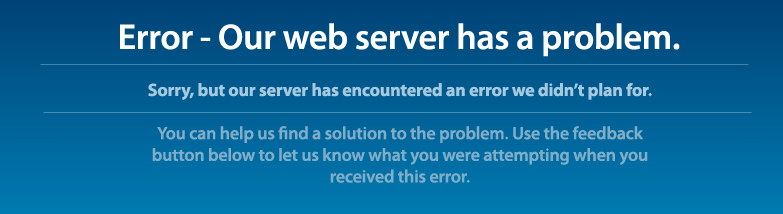
<style>
.page{position:relative;width:783px;height:214px}
.page>*{position:absolute;margin:0}
.t1{font:36px "MyriadPro-Semibold";letter-spacing:-0.01em;color:#fefefe}
.t2{font:18px "MyriadPro-Semibold";letter-spacing:-0.01em;color:#80adc8}
.t3{font:18px "MyriadPro-Bold";letter-spacing:-0.01em;color:#a5c9de}
</style>
<div class="page">
<p class="t1" style="left:120px;top:23px;width:560px;height:34px">Error - Our web server has a problem.</p>
<p class="t2" style="left:148px;top:83px;width:504px;height:100px;text-align:center"><span class="t3">Sorry, but our server has encountered an error we didn’t plan for. <br></span><br>You can help us find a solution to the problem. Use the feedback button below to let us know what you were attempting when you received this error.</p>
</div>
